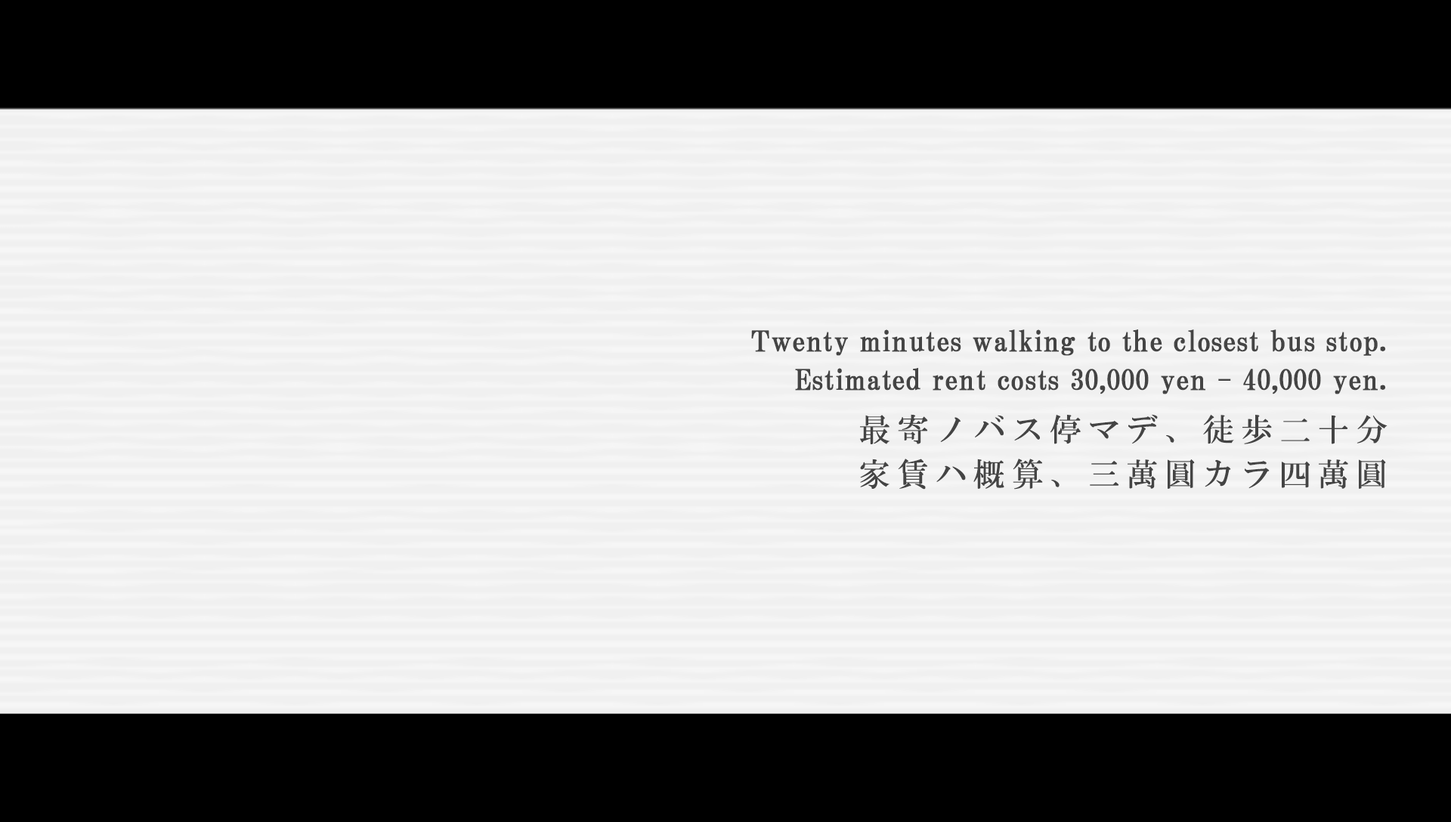
<style>
.page{position:relative;width:1451px;height:822px;background:#f0f0f0}
.page>*{position:absolute;margin:0}
.t1{font:28.2px/38.3px "HGPMinchoB";letter-spacing:0.01em;color:#444444;font-weight:bold}
.t2{font:31.7px/44.6px "HGMinchoB";letter-spacing:0.205em;color:#444444}
</style>
<div class="page">
<p class="t1" style="left:751px;top:329px;width:634px;height:65px;text-align:right">Twenty minutes walking to the closest bus stop.<br>Estimated rent costs 30,000 yen - 40,000 yen.</p>
<p class="t2" style="left:860px;top:414px;width:527px;height:76px;text-align:right">最寄ノバス停マデ、徒歩二十分<br>家賃ハ概算、三萬圓カラ四萬圓</p>
</div>
